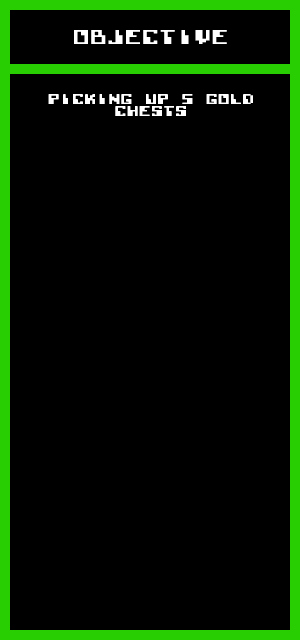
<style>
.page{position:relative;width:300px;height:640px;background:#000000}
.page>*{position:absolute;margin:0}
.t1{font:13.9px "Lode-Runner-(C64)";color:#ffffff}
.t2{font:9.7px "Lode-Runner-(C64)";color:#ffffff}
</style>
<div class="page">
<p class="t1" style="left:74px;top:30px;width:153px;height:14px">OBJECTIVE</p>
<p class="t2" style="left:48px;top:94px;width:205px;height:22px;text-align:center">PICKING UP 5 GOLD <br>CHESTS</p>
</div>
